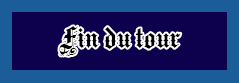
<style>
.page{position:relative;width:239px;height:83px;background:#0d004c}
.page>*{position:absolute;margin:0}
.t1{font:30px "MediciText";color:#000000}
</style>
<div class="page">
<p class="t1" style="left:59px;top:26px;width:122px;height:30px">Fin du tour</p>
</div>
